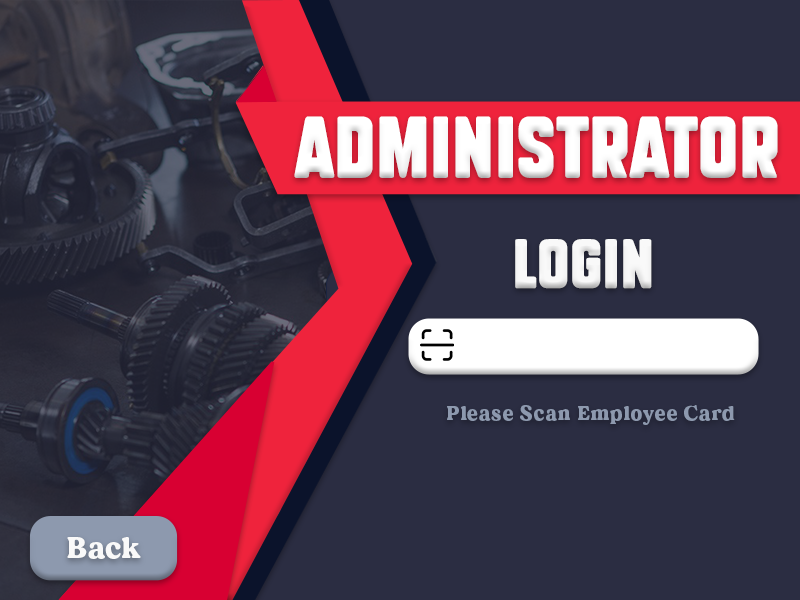
<style>
.page{position:relative;width:800px;height:600px;background:#2b2d42}
.page>*{position:absolute;margin:0}
.t1{font:60px "SubtleCurves";letter-spacing:0.025em;color:#ffffff}
.t2{font:48px "SubtleCurves";letter-spacing:0.025em;color:#f9f9f9}
.t3{font:20px "MADEDillan";letter-spacing:0.05em;color:#8d99ae}
.t4{font:30px "MADEDillan";letter-spacing:0.025em;color:#f9f9f9}
</style>
<div class="page">
<p class="t1" style="left:294px;top:116px;width:484px;height:62px">Administrator</p>
<p class="t2" style="left:515px;top:239px;width:137px;height:50px">Login</p>
<p class="t3" style="left:447px;top:405px;width:288px;height:20px">Please Scan Employee Card</p>
<p class="t4" style="left:67px;top:537px;width:74px;height:22px">Back</p>
</div>
